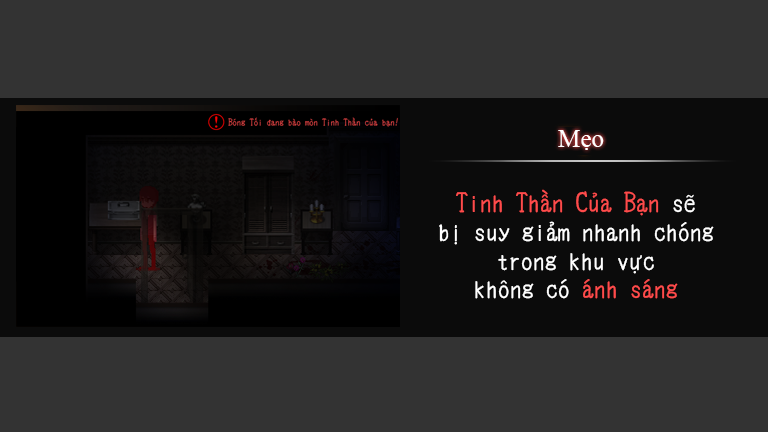
<style>
.page{position:relative;width:768px;height:432px;background:#333333}
.page>*{position:absolute;margin:0}
.t1{font:24px "Cinecaption";color:#ffffff}
.t2{font:24px "Cinecaption";color:#ff4b4b}
</style>
<div class="page">
<p class="t1" style="left:439px;top:189px;width:275px;height:110px;text-align:center"><span class="t2">Tinh Thần Của Bạn</span> sẽ<br>bị suy giảm nhanh chóng<br>trong khu vực<br>không có <span class="t2">ánh sáng</span></p>
</div>
